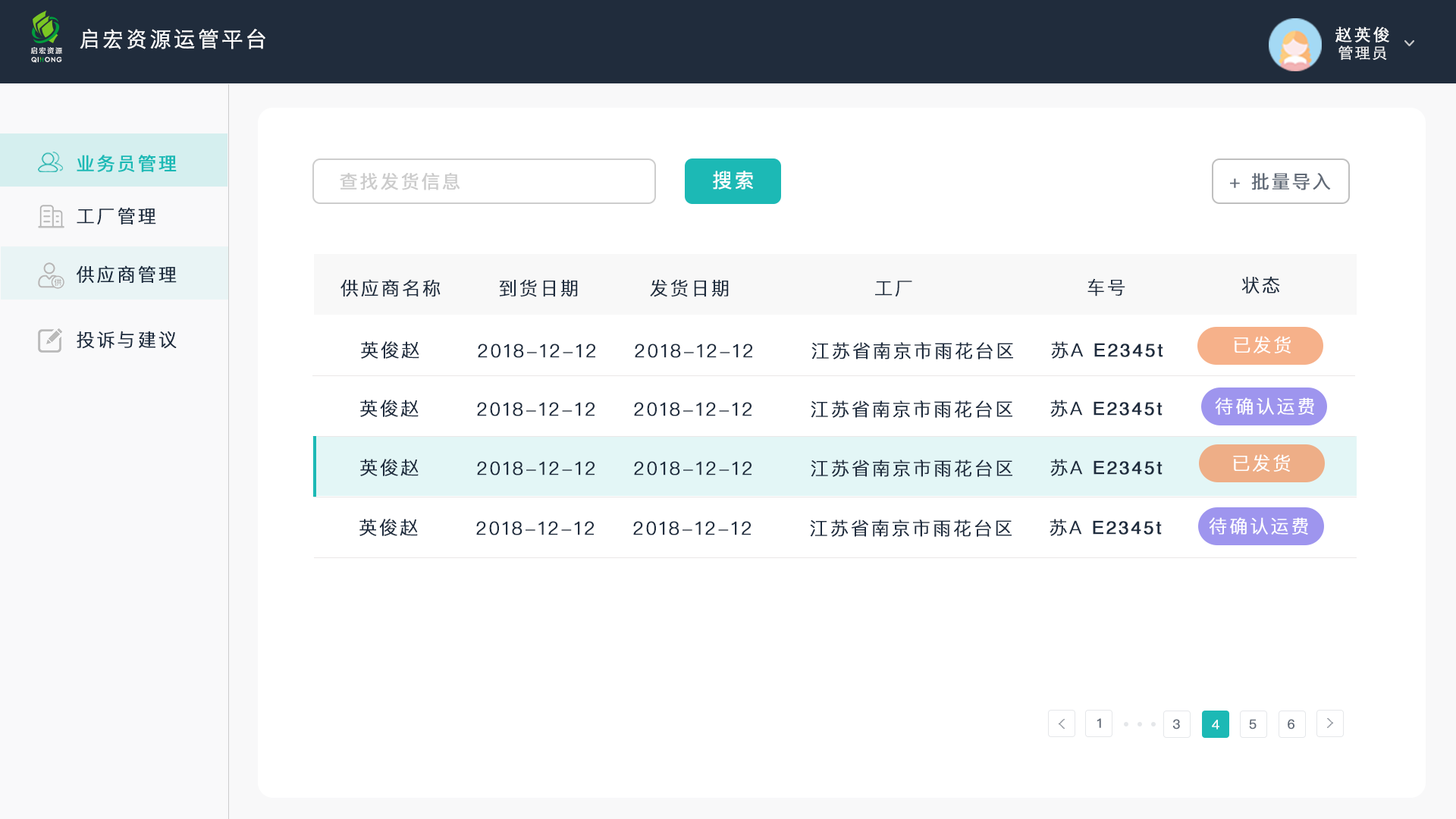
<style>
.page{position:relative;width:1456px;height:819px;background:#ffffff}
.page>*{position:absolute;margin:0}
.t1{font:21.2px "STHeitiSC-Light";letter-spacing:0.1em;color:#ffffff;font-weight:bold}
.t2{font:16.7px "STHeitiSC-Light";letter-spacing:0.1em;color:#ffffff;font-weight:bold}
.t3{font:7px "FZLTZHK--GBK1-0";letter-spacing:0.18em;color:#ffffff}
.t4{font:15.2px "STHeitiSC-Light";letter-spacing:0.1em;color:#ffffff;font-weight:bold}
.t5{font:6.3px "CenturyGothic";letter-spacing:0.1em;color:#ffffff;font-weight:bold}
.t6{font:18.2px "PingFangSC-Regular";letter-spacing:0.1em;color:#1cb9b5;font-weight:bold}
.t7{font:18.2px "PingFangSC-Regular";letter-spacing:0.1em;color:#cccccc;font-weight:bold}
.t8{font:19.7px "PingFangSC-Regular";letter-spacing:0.1em;color:#ffffff;font-weight:bold}
.t9{font:18.2px "PingFangSC-Regular";letter-spacing:0.1em;color:#626b78;font-weight:bold}
.t10{font:18.2px "PingFangSC-Light";letter-spacing:0.1em;color:#1e2c3e;font-weight:bold}
.t11{font:18.2px "Helvetica";letter-spacing:0.1em;color:#1e2c3e;font-weight:bold}
.t12{font:18.2px "PingFangSC-Light";letter-spacing:0.1em;color:#ffffff;font-weight:bold}
.t13{font:12.7px "PingFangSC-Regular";letter-spacing:0.1em;color:#626b78;font-weight:bold}
.t14{font:12.7px "PingFangSC-Regular";letter-spacing:0.1em;color:#ffffff;font-weight:bold}
</style>
<div class="page">
<p class="t1" style="left:80px;top:29px;width:185px;height:20px">启宏资源运管平台</p>
<p class="t2" style="left:1335px;top:27px;width:54px;height:15px">赵英俊</p>
<p class="t3" style="left:31px;top:47px;width:31px;height:7px">启宏资源</p>
<p class="t4" style="left:1338px;top:45px;width:49px;height:15px;opacity:0.9">管理员</p>
<p class="t5" style="left:31px;top:57px;width:31px;height:6px">QI  ONG</p>
<p class="t6" style="left:77px;top:155px;width:100px;height:17px">业务员管理</p>
<p class="t7" style="left:340px;top:173px;width:120px;height:17px">查找发货信息</p>
<p class="t8" style="left:713px;top:171px;width:40px;height:19px">搜索</p>
<p class="t9" style="left:1230px;top:173px;width:101px;height:17px">+ 批量导入</p>
<p class="t10" style="left:77px;top:207px;width:79px;height:17px">工厂管理</p>
<p class="t10" style="left:77px;top:265px;width:100px;height:18px">供应商管理</p>
<p class="t10" style="left:340px;top:279px;width:101px;height:18px">供应商名称</p>
<p class="t10" style="left:499px;top:279px;width:79px;height:18px">到货日期</p>
<p class="t10" style="left:650px;top:279px;width:79px;height:18px">发货日期</p>
<p class="t10" style="left:875px;top:281px;width:37px;height:16px">工厂</p>
<p class="t10" style="left:1087px;top:278px;width:38px;height:19px">车号</p>
<p class="t10" style="left:1241px;top:276px;width:39px;height:17px">状态</p>
<p class="t10" style="left:77px;top:331px;width:100px;height:18px">投诉与建议</p>
<p class="t10" style="left:361px;top:341px;width:58px;height:18px">英俊赵</p>
<p class="t11" style="left:1051px;top:341px;width:112px;height:18px"><span class="t10">苏A </span>E2345t</p>
<p class="t12" style="left:1234px;top:336px;width:57px;height:17px">已发货</p>
<p class="t10" style="left:478px;top:344px;width:117px;height:14px">2018-12-12</p>
<p class="t10" style="left:635px;top:344px;width:117px;height:14px">2018-12-12</p>
<p class="t10" style="left:811px;top:342px;width:202px;height:17px">江苏省南京市雨花台区</p>
<p class="t10" style="left:360px;top:400px;width:59px;height:17px">英俊赵</p>
<p class="t10" style="left:477px;top:402px;width:118px;height:14px">2018-12-12</p>
<p class="t10" style="left:634px;top:402px;width:117px;height:14px">2018-12-12</p>
<p class="t10" style="left:811px;top:400px;width:201px;height:18px">江苏省南京市雨花台区</p>
<p class="t11" style="left:1050px;top:400px;width:113px;height:17px"><span class="t10">苏A </span>E2345t</p>
<p class="t12" style="left:1215px;top:397px;width:99px;height:18px">待确认运费</p>
<p class="t10" style="left:360px;top:459px;width:59px;height:17px">英俊赵</p>
<p class="t10" style="left:477px;top:461px;width:118px;height:14px">2018-12-12</p>
<p class="t10" style="left:634px;top:461px;width:117px;height:14px">2018-12-12</p>
<p class="t10" style="left:811px;top:460px;width:201px;height:17px">江苏省南京市雨花台区</p>
<p class="t11" style="left:1050px;top:459px;width:113px;height:17px"><span class="t10">苏A </span>E2345t</p>
<p class="t12" style="left:1233px;top:454px;width:57px;height:18px">已发货</p>
<p class="t10" style="left:359px;top:519px;width:59px;height:17px">英俊赵</p>
<p class="t10" style="left:476px;top:521px;width:118px;height:14px">2018-12-12</p>
<p class="t10" style="left:633px;top:521px;width:118px;height:14px">2018-12-12</p>
<p class="t10" style="left:810px;top:519px;width:202px;height:18px">江苏省南京市雨花台区</p>
<p class="t11" style="left:1050px;top:519px;width:112px;height:17px"><span class="t10">苏A </span>E2345t</p>
<p class="t12" style="left:1209px;top:517px;width:99px;height:18px">待确认运费</p>
<p class="t13" style="left:1097px;top:718px;width:4px;height:10px">1</p>
<p class="t13" style="left:1172px;top:719px;width:8px;height:11px">3</p>
<p class="t14" style="left:1212px;top:720px;width:7px;height:10px">4</p>
<p class="t13" style="left:1249px;top:719px;width:8px;height:11px">5</p>
<p class="t13" style="left:1288px;top:719px;width:6px;height:11px">6</p>
</div>
